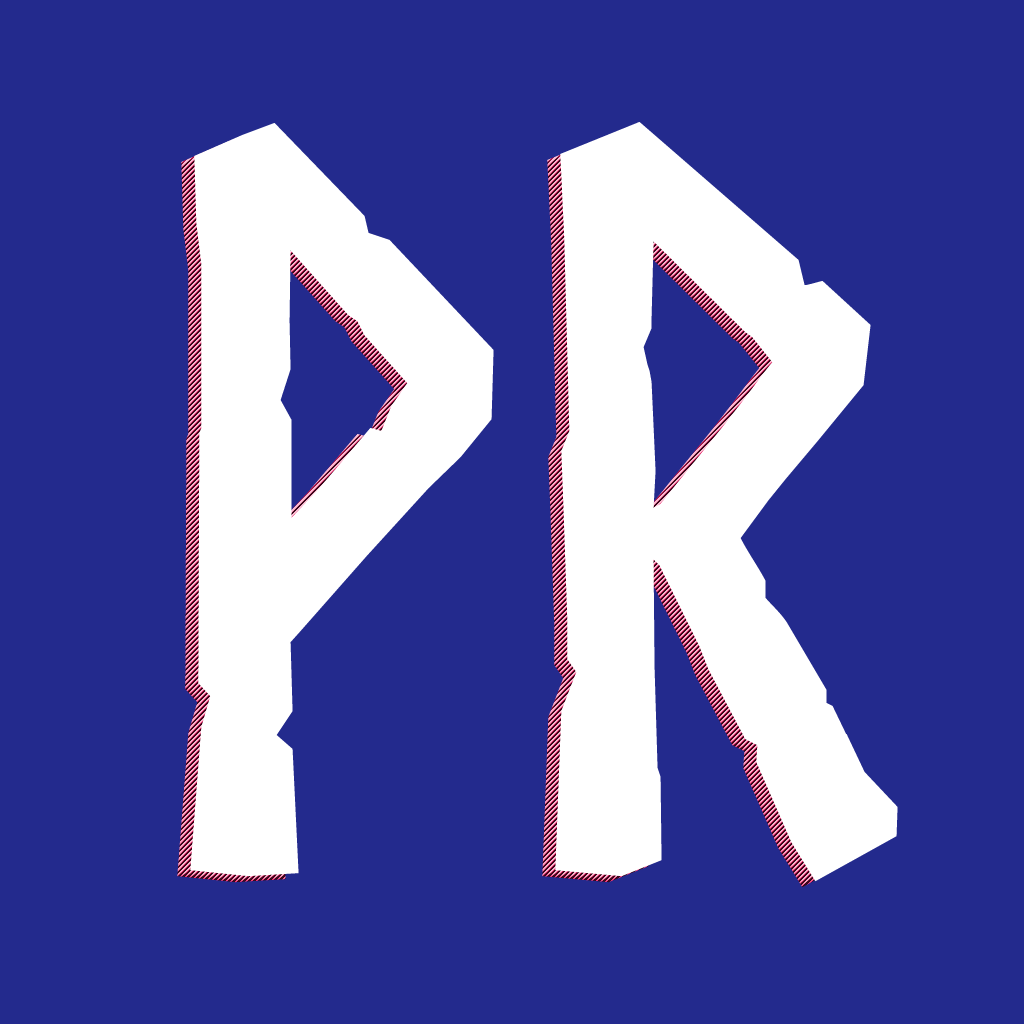
<style>
.page{position:relative;width:1024px;height:1024px;background:#232a8d}
.page>*{position:absolute;margin:0}
.t1{font:1000px "Norse-Bold";letter-spacing:-0.01em;color:#ffffff}
</style>
<div class="page">
<p class="t1" style="left:190px;top:122px;width:708px;height:760px">pr</p>
<p class="t1" style="left:177px;top:128px;width:708px;height:760px">pr</p>
</div>
